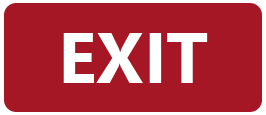
<style>
.page{position:relative;width:266px;height:115px;background:#a51724}
.page>*{position:absolute;margin:0}
.t1{font:72px "SegoeUI-Bold";color:#feffff}
</style>
<div class="page">
<p class="t1" style="left:63px;top:33px;width:145px;height:50px">EXIT</p>
</div>
